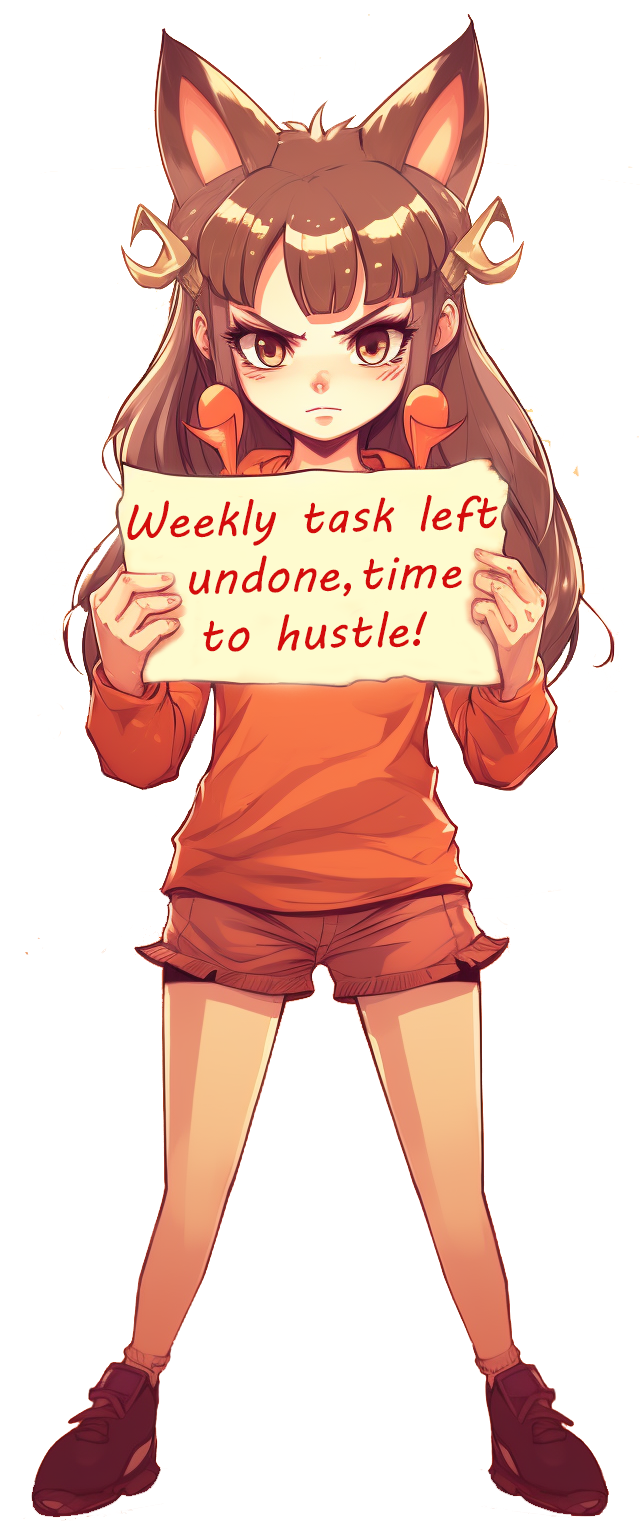
<style>
.page{position:relative;width:640px;height:1525px;background:#ffffff}
.page>*{position:absolute;margin:0}
.t1{font:48px "MVBoli";letter-spacing:0.006em;color:#d40c0c}
</style>
<div class="page">
<p class="t1" style="left:127px;top:495px;width:371px;height:157px;text-align:center;rotate:-2deg">Weekly task left<br> undone,time<br>to hustle!</p>
</div>
